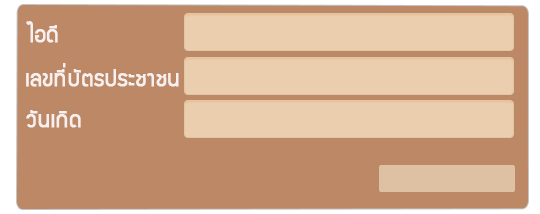
<style>
.page{position:relative;width:540px;height:214px;background:#bd8866}
.page>*{position:absolute;margin:0}
.t1{font:24px "supermarket";color:#f8efef;font-weight:bold}
</style>
<div class="page">
<p class="t1" style="left:26px;top:21px;width:32px;height:22px">ไอดี</p>
<p class="t1" style="left:26px;top:63px;width:153px;height:24px">เลขที่บัตรประชาชน</p>
<p class="t1" style="left:26px;top:110px;width:55px;height:18px">วันเกิด</p>
</div>
